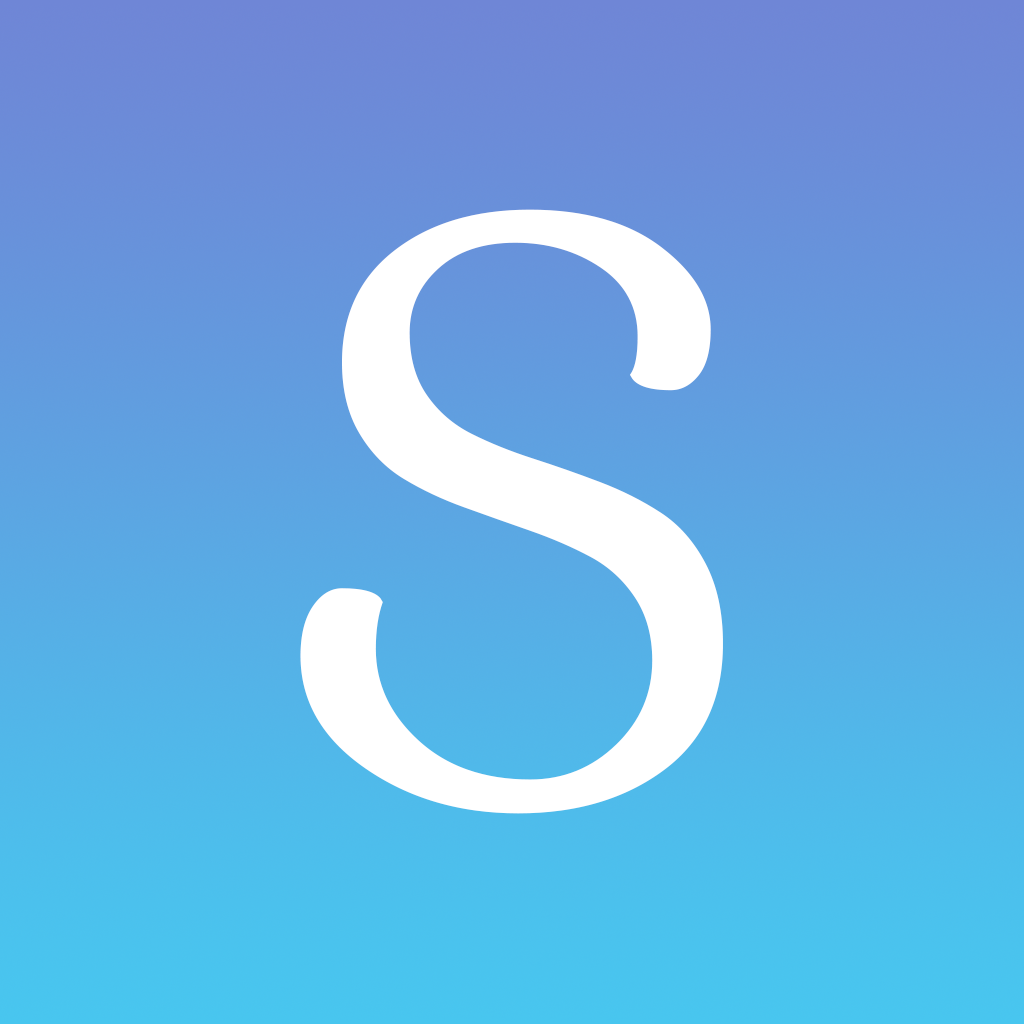
<style>
.page{position:relative;width:1024px;height:1024px}
.page>*{position:absolute;margin:0}
.t1{font:768px "Sofia-Regular";color:#ffffff}
</style>
<div class="page">
<p class="t1" style="left:300px;top:209px;width:423px;height:605px">S</p>
</div>
